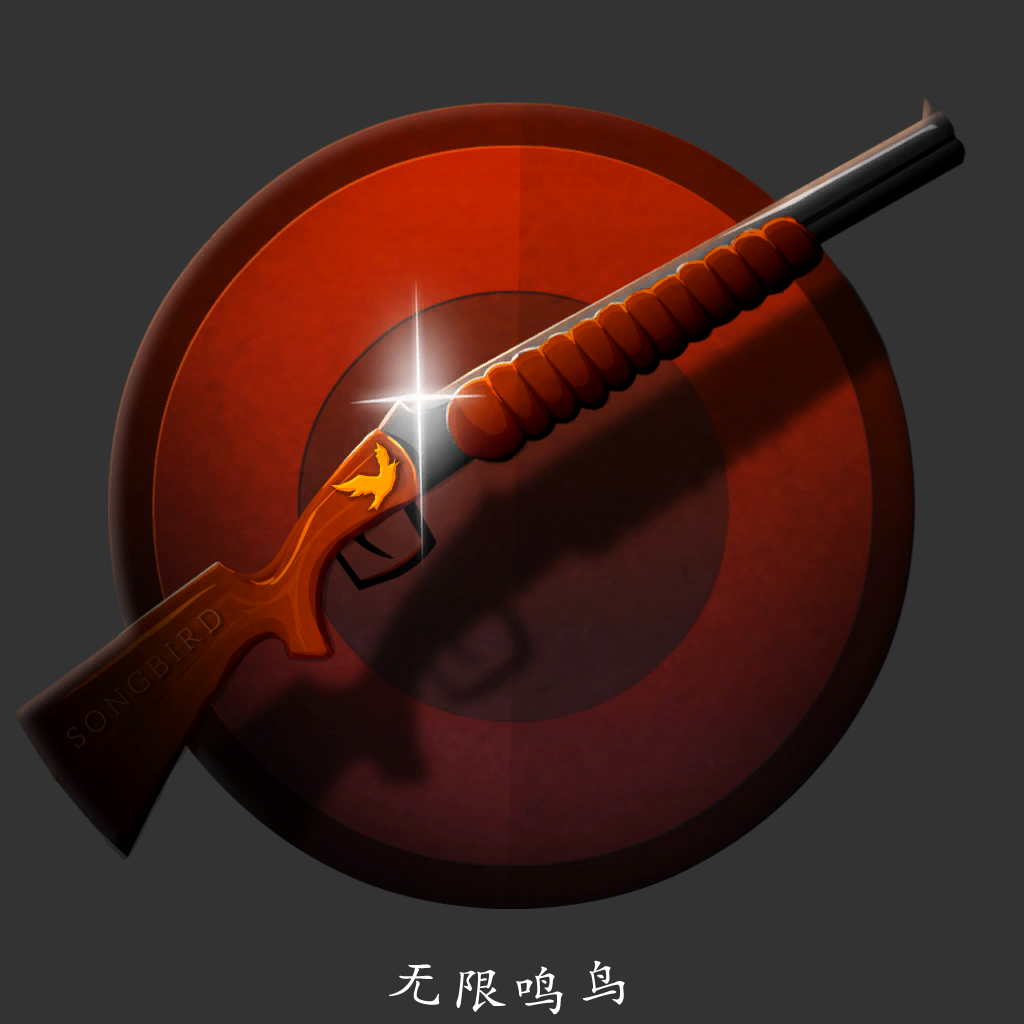
<style>
.page{position:relative;width:1024px;height:1024px;background:#333333}
.page>*{position:absolute;margin:0}
.t1{font:53.3px "STKaiti";letter-spacing:0.1em;color:#ffffff}
</style>
<div class="page">
<p class="t1" style="left:389px;top:960px;width:236px;height:55px">无限鸣鸟</p>
</div>
